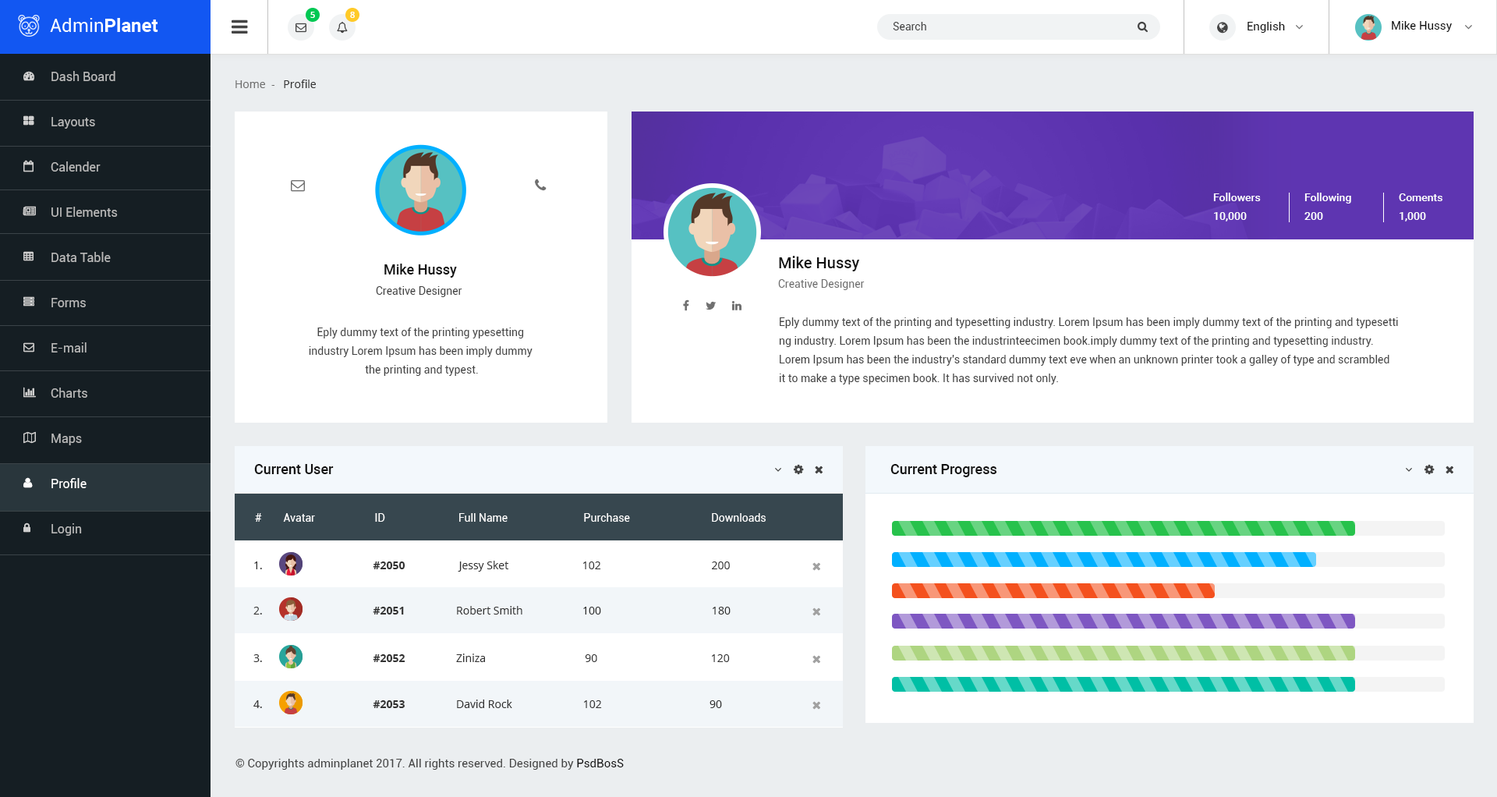
<style>
.page{position:relative;width:1497px;height:797px;background:#ffffff}
.page>*{position:absolute;margin:0}
.t1{font:8.6px "OpenSans-Semibold";color:#ffffff}
.t2{font:10.9px "Roboto-Regular";color:#444444}
.t3{font:11.7px "Roboto-Regular";color:#111111}
.t4{font:12.5px/45.2px "Roboto-Regular";color:#b9b9b9}
.t5{font:12.5px/45.2px "Roboto-Regular";color:#ffffff}
.t6{font:10.9px "OpenSans";color:#707070}
.t7{font:10.9px "OpenSans";color:#333333}
.t8{font:10.9px/18.7px "Roboto-Medium";color:#ffffff}
.t9{font:15.6px "Roboto-Medium";color:#111111}
.t10{font:14px "Roboto-Medium";color:#111111}
.t11{font:10.9px "Roboto-Regular";color:#707070}
.t12{font:10.9px/18.7px "Roboto-Regular";color:#444444}
.t13{font:10.9px "Roboto-Regular";color:#ffffff}
.t14{font:10.9px "OpenSans-Bold";color:#333333}
.t15{font:11.7px "Roboto-Regular";color:#444444}
</style>
<div class="page">
<p class="t1" style="left:310px;top:12px;width:5px;height:6px">5</p>
<p class="t1" style="left:350px;top:12px;width:5px;height:6px">8</p>
<p class="t2" style="left:893px;top:22px;width:33px;height:8px">Search</p>
<p class="t3" style="left:1247px;top:22px;width:38px;height:11px">English</p>
<p class="t3" style="left:1391px;top:21px;width:61px;height:11px">Mike Hussy</p>
<p class="t4" style="left:51px;top:71px;width:67px;height:465px">Dash Board<br>Layouts<br>Calender<br>UI Elements<br>Data Table<br>Forms<br>E-mail<br>Charts<br>Maps<br><span class="t5">Profile<br></span>Login</p>
<p class="t6" style="left:235px;top:80px;width:81px;height:8px">Home  -   <span class="t7">Profile</span></p>
<p class="t8" style="left:1213px;top:193px;width:48px;height:28px">Followers<br>10,000</p>
<p class="t8" style="left:1304px;top:193px;width:47px;height:27px">Following<br>200</p>
<p class="t8" style="left:1399px;top:193px;width:43px;height:28px">Coments<br>1,000</p>
<p class="t9" style="left:779px;top:256px;width:81px;height:15px">Mike Hussy</p>
<p class="t10" style="left:384px;top:263px;width:73px;height:15px">Mike Hussy</p>
<p class="t11" style="left:778px;top:279px;width:87px;height:11px">Creative Designer</p>
<p class="t2" style="left:376px;top:286px;width:86px;height:11px">Creative Designer</p>
<p class="t12" style="left:779px;top:317px;width:619px;height:67px">Eply dummy text of the printing and typesetting industry. Lorem Ipsum has been imply dummy text of the printing and typesetti<br>ng industry. Lorem Ipsum has been the industrinteecimen book.imply dummy text of the printing and typesetting industry. <br>Lorem Ipsum has been the industry's standard dummy text eve when an unknown printer took a galley of type and scrambled <br>it to make a type specimen book. It has survived not only.</p>
<p class="t12" style="left:309px;top:327px;width:223px;height:49px;text-align:center">Eply dummy text of the printing ypesetting <br>industry Lorem Ipsum has been imply dummy <br>the printing and typest.</p>
<p class="t10" style="left:254px;top:464px;width:80px;height:10px">Current User</p>
<p class="t10" style="left:890px;top:464px;width:107px;height:13px">Current Progress</p>
<p class="t13" style="left:255px;top:513px;width:511px;height:9px">#        Avatar                      ID                           Full Name                            Purchase                              Downloads</p>
<p class="t7" style="left:254px;top:560px;width:476px;height:11px">1.                                       <span class="t14">#2050 </span>                  Jessy Sket                          102                                       200</p>
<p class="t7" style="left:253px;top:606px;width:477px;height:8px">2.                                       <span class="t14">#2051</span>                  Robert Smith                     100                                       180</p>
<p class="t7" style="left:253px;top:653px;width:477px;height:9px">3.                                       <span class="t14">#2052</span>                  Ziniza                                   90                                        120</p>
<p class="t7" style="left:253px;top:699px;width:469px;height:9px">4.                                       <span class="t14">#2053</span>                  David Rock                         102                                      90</p>
<p class="t15" style="left:235px;top:758px;width:389px;height:11px">© Copyrights adminplanet 2017. All rights reserved. Designed by <span class="t3">PsdBosS</span></p>
</div>
